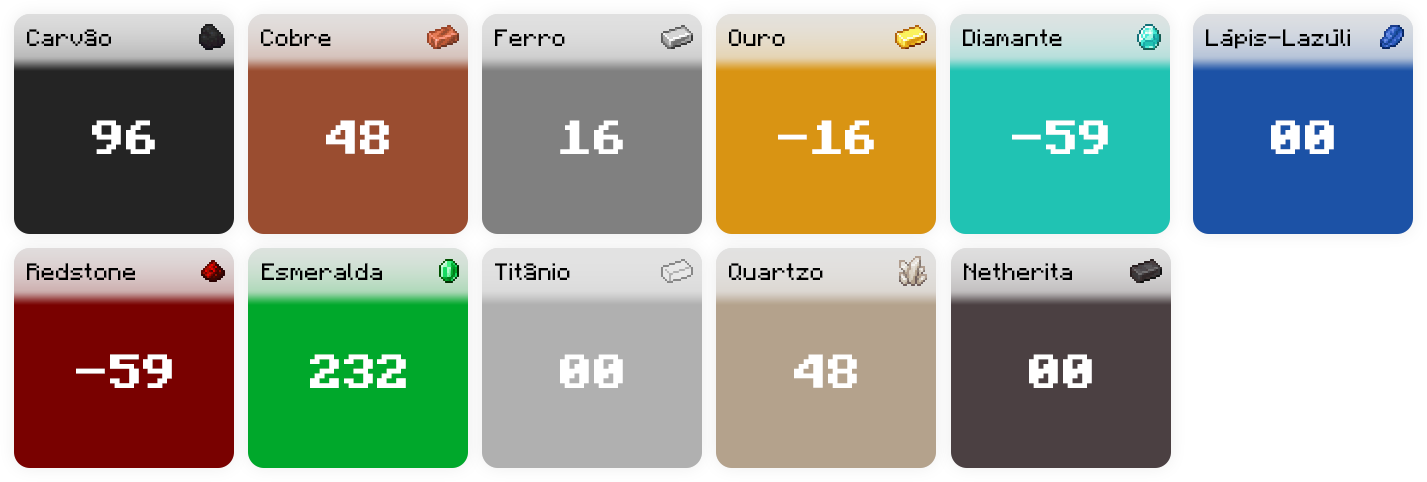
<style>
.page{position:relative;width:1427px;height:482px}
.page>*{position:absolute;margin:0}
.t1{font:24px "Minecraft-Regular";color:#000000}
.t2{font:48px "Minecraft-Bold";color:#ffffff}
</style>
<div class="page">
<p class="t1" style="left:27px;top:29px;width:84px;height:17px">Carvâo</p>
<p class="t1" style="left:261px;top:29px;width:70px;height:17px">Cobre</p>
<p class="t1" style="left:495px;top:29px;width:70px;height:17px">Ferro</p>
<p class="t1" style="left:729px;top:29px;width:56px;height:17px">Ouro</p>
<p class="t1" style="left:963px;top:29px;width:99px;height:17px">Diamante</p>
<p class="t1" style="left:1206px;top:29px;width:144px;height:20px">Lápis-Lazúli</p>
<p class="t2" style="left:92px;top:120px;width:63px;height:34px">96</p>
<p class="t2" style="left:326px;top:120px;width:63px;height:34px">48</p>
<p class="t2" style="left:560px;top:120px;width:63px;height:34px">16</p>
<p class="t2" style="left:778px;top:120px;width:96px;height:34px">-16</p>
<p class="t2" style="left:1012px;top:120px;width:96px;height:34px">-59</p>
<p class="t2" style="left:1271px;top:120px;width:63px;height:34px">00</p>
<p class="t1" style="left:27px;top:263px;width:108px;height:17px">Redstone</p>
<p class="t1" style="left:262px;top:263px;width:120px;height:17px">Esmeralda</p>
<p class="t1" style="left:495px;top:263px;width:75px;height:17px">Titânio</p>
<p class="t1" style="left:729px;top:263px;width:94px;height:17px">Quartzo</p>
<p class="t1" style="left:964px;top:263px;width:108px;height:17px">Netherita</p>
<p class="t2" style="left:76px;top:354px;width:96px;height:34px">-59</p>
<p class="t2" style="left:310px;top:354px;width:96px;height:34px">232</p>
<p class="t2" style="left:560px;top:354px;width:63px;height:34px">00</p>
<p class="t2" style="left:794px;top:354px;width:63px;height:34px">48</p>
<p class="t2" style="left:1029px;top:354px;width:63px;height:34px">00</p>
</div>
